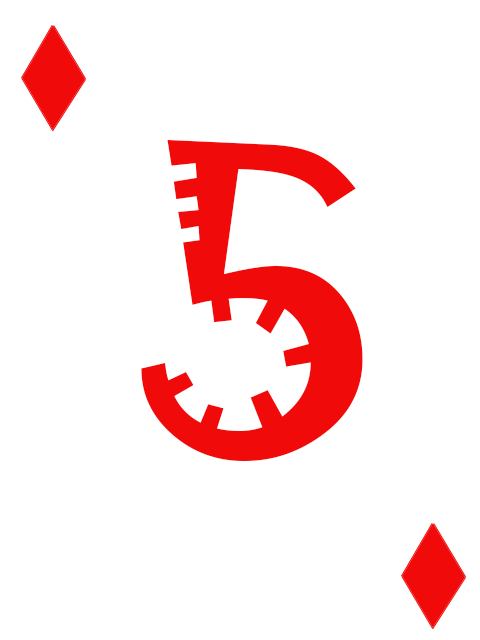
<style>
.page{position:relative;width:480px;height:640px;background:#ffffff}
.page>*{position:absolute;margin:0}
.t1{font:386.3px "Jokerman-Regular";color:#f10a0a}
</style>
<div class="page">
<p class="t1" style="left:141px;top:140px;width:222px;height:321px">5</p>
</div>
